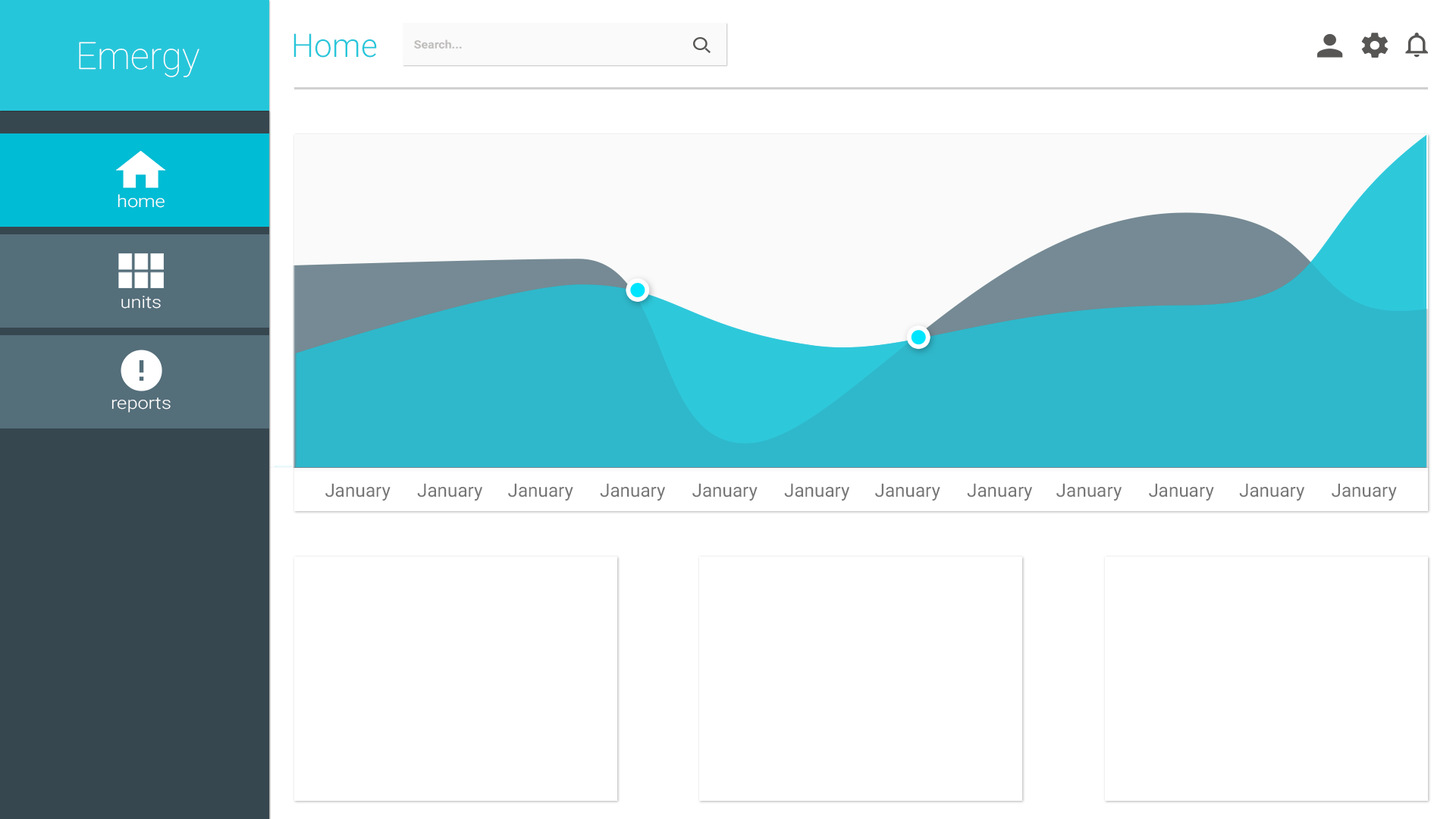
<style>
.page{position:relative;width:1456px;height:819px;background:#ffffff}
.page>*{position:absolute;margin:0}
.t1{font:37.6px "Roboto-Thin";color:#ffffff}
.t2{font:32.6px "Roboto-Light";color:#26c6da}
.t3{font:11.2px "Roboto-Bold";color:#bcbbb9;scale:1.08 1}
.t4{font:16.7px "Roboto-Light";color:#ffffff;scale:1.15 1}
.t5{font:18.4px "Roboto-Regular";color:#757575}
</style>
<div class="page">
<p class="t1" style="left:79px;top:42px;width:120px;height:35px">Emergy</p>
<p class="t2" style="left:293px;top:33px;width:84px;height:25px">Home</p>
<p class="t3" style="left:414px;top:39px;width:48px;height:10px">Search...</p>
<p class="t4" style="left:118px;top:194px;width:47px;height:14px">home</p>
<p class="t4" style="left:121px;top:296px;width:40px;height:13px">units</p>
<p class="t4" style="left:111px;top:397px;width:60px;height:16px">reports</p>
<p class="t5" style="left:325px;top:483px;width:66px;height:18px">January</p>
<p class="t5" style="left:417px;top:483px;width:65px;height:18px">January</p>
<p class="t5" style="left:508px;top:483px;width:65px;height:18px">January</p>
<p class="t5" style="left:600px;top:483px;width:65px;height:18px">January</p>
<p class="t5" style="left:692px;top:483px;width:66px;height:18px">January</p>
<p class="t5" style="left:784px;top:483px;width:65px;height:18px">January</p>
<p class="t5" style="left:875px;top:483px;width:65px;height:18px">January</p>
<p class="t5" style="left:967px;top:483px;width:65px;height:18px">January</p>
<p class="t5" style="left:1056px;top:483px;width:66px;height:18px">January</p>
<p class="t5" style="left:1149px;top:483px;width:65px;height:18px">January</p>
<p class="t5" style="left:1239px;top:483px;width:65px;height:18px">January</p>
<p class="t5" style="left:1332px;top:483px;width:65px;height:18px">January</p>
</div>
